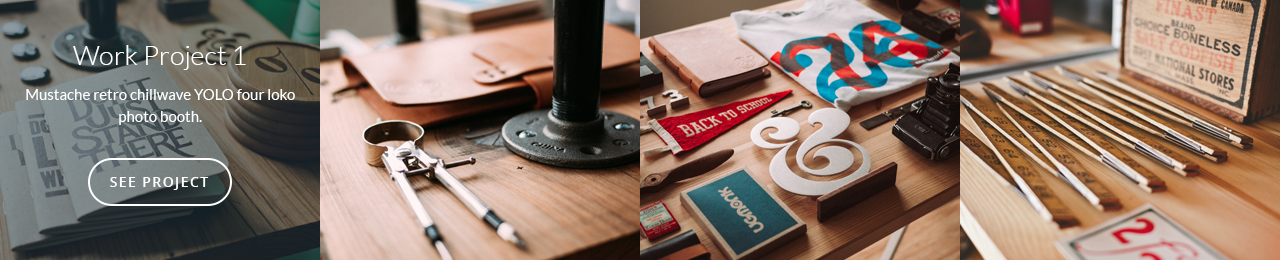
<style>
.page{position:relative;width:1280px;height:260px}
.page>*{position:absolute;margin:0}
.t1{font:27px "Lato-Light";color:#ffffff}
.t2{font:15px/22px "Lato-Regular";color:#ffffff}
.t3{font:14px "OpenSans-Semibold";letter-spacing:0.1em;color:#ffffff}
</style>
<div class="page">
<p class="t1" style="left:73px;top:45px;width:173px;height:25px">Work Project 1</p>
<p class="t2" style="left:26px;top:89px;width:269px;height:36px;text-align:center">Mustache retro chillwave YOLO four loko photo booth.</p>
<p class="t3" style="left:110px;top:177px;width:99px;height:13px">SEE PROJECT</p>
</div>
